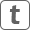
<style>
.page{position:relative;width:30px;height:30px;background:#ffffff}
.page>*{position:absolute;margin:0}
.t1{font:30px "ErasITC-Demi";letter-spacing:0.1em;color:#626262}
</style>
<div class="page">
<p class="t1" style="left:9px;top:5px;width:11px;height:19px">t</p>
</div>
